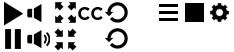
<style>
.page{position:relative;width:234px;height:52px;background:#ffffff}
.page>*{position:absolute;margin:0}
.t1{font:18px "GothamHTF-Bold";color:#000000}
</style>
<div class="page">
<p class="t1" style="left:78px;top:7px;width:25px;height:13px">CC</p>
</div>
